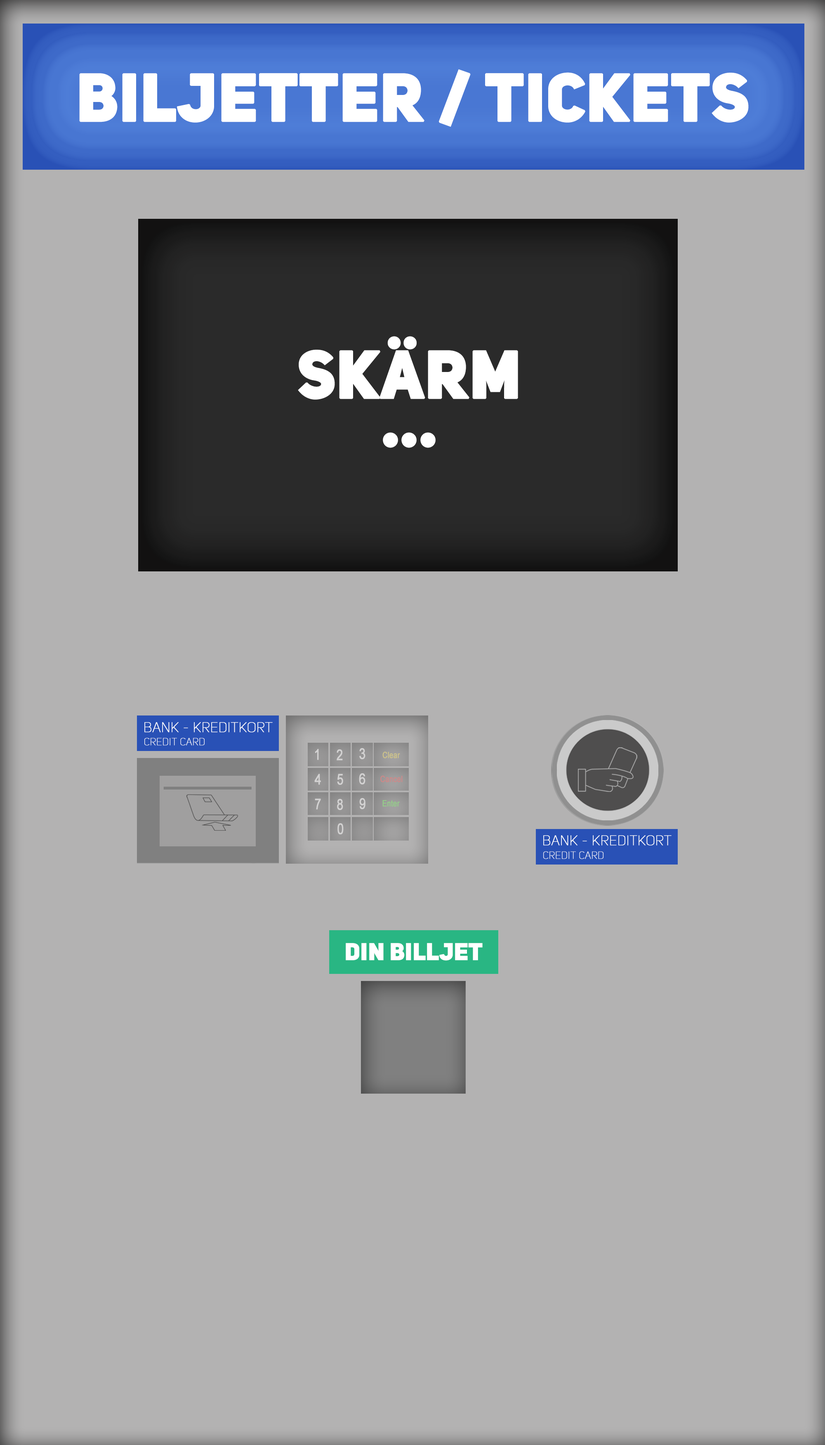
<style>
.page{position:relative;width:825px;height:1445px;background:#b3b2b2}
.page>*{position:absolute;margin:0}
.t1{font:66px "UniSansHeavyCAPS";color:#ffffff;font-weight:bold}
.t2{font:66px/48.3px "UniSansHeavyCAPS";color:#ffffff;font-weight:bold}
.t3{font:13.8px "UniSansThinCAPS";color:#ffffff;font-weight:bold}
.t4{font:10.1px "UniSansThinCAPS";color:#ffffff;font-weight:bold}
.t5{font:14.8px "ArialMT";color:#d3d2d2;font-weight:bold;scale:0.8 1}
.t6{font:8.6px "ArialMT";color:#cec388;font-weight:bold;scale:0.8 1}
.t7{font:8.6px "ArialMT";color:#ce8888;font-weight:bold;scale:0.8 1}
.t8{font:8.6px "ArialMT";color:#94cd88;font-weight:bold;scale:0.8 1}
.t9{font:23.7px "UniSansHeavyCAPS";color:#ffffff;font-weight:bold}
</style>
<div class="page">
<p class="t1" style="left:79px;top:69px;width:670px;height:58px">Biljetter / Tickets</p>
<p class="t2" style="left:298px;top:336px;width:220px;height:112px;text-align:center">Skärm<br>...</p>
<p class="t3" style="left:144px;top:722px;width:129px;height:10px">Bank - Kreditkort</p>
<p class="t4" style="left:144px;top:738px;width:61px;height:7px">Credit Card</p>
<p class="t5" style="left:315px;top:749px;width:4px;height:11px">1</p>
<p class="t5" style="left:337px;top:749px;width:6px;height:11px">2</p>
<p class="t5" style="left:359px;top:748px;width:7px;height:11px">3</p>
<p class="t6" style="left:383px;top:751px;width:17px;height:7px">Clear</p>
<p class="t5" style="left:315px;top:773px;width:6px;height:12px">4</p>
<p class="t5" style="left:337px;top:773px;width:6px;height:12px">5</p>
<p class="t5" style="left:359px;top:773px;width:7px;height:11px">6</p>
<p class="t7" style="left:381px;top:775px;width:22px;height:7px">Cancel</p>
<p class="t5" style="left:359px;top:798px;width:7px;height:11px">9</p>
<p class="t5" style="left:315px;top:798px;width:6px;height:11px">7</p>
<p class="t5" style="left:337px;top:799px;width:6px;height:11px">8</p>
<p class="t8" style="left:383px;top:800px;width:17px;height:6px">Enter</p>
<p class="t5" style="left:338px;top:823px;width:6px;height:11px">0</p>
<p class="t3" style="left:544px;top:835px;width:128px;height:10px">Bank - Kreditkort</p>
<p class="t4" style="left:544px;top:851px;width:60px;height:8px">Credit Card</p>
<p class="t9" style="left:346px;top:943px;width:137px;height:17px">Din billjet</p>
</div>
